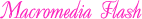
<style>
.page{position:relative;width:142px;height:19px;background:#ffffff}
.page>*{position:absolute;margin:0}
.t1{font:24px "UkrainianDecor";color:#fc24bc}
</style>
<div class="page">
<p class="t1" style="left:0px;top:0px;width:142px;height:19px">Macromedia Flash</p>
</div>
